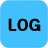
<style>
.page{position:relative;width:48px;height:48px;background:#42c0fb}
.page>*{position:absolute;margin:0}
.t1{font:14px "HeadlineR-HM";color:#010000}
</style>
<div class="page">
<p class="t1" style="left:8px;top:18px;width:33px;height:13px">LOG</p>
</div>
